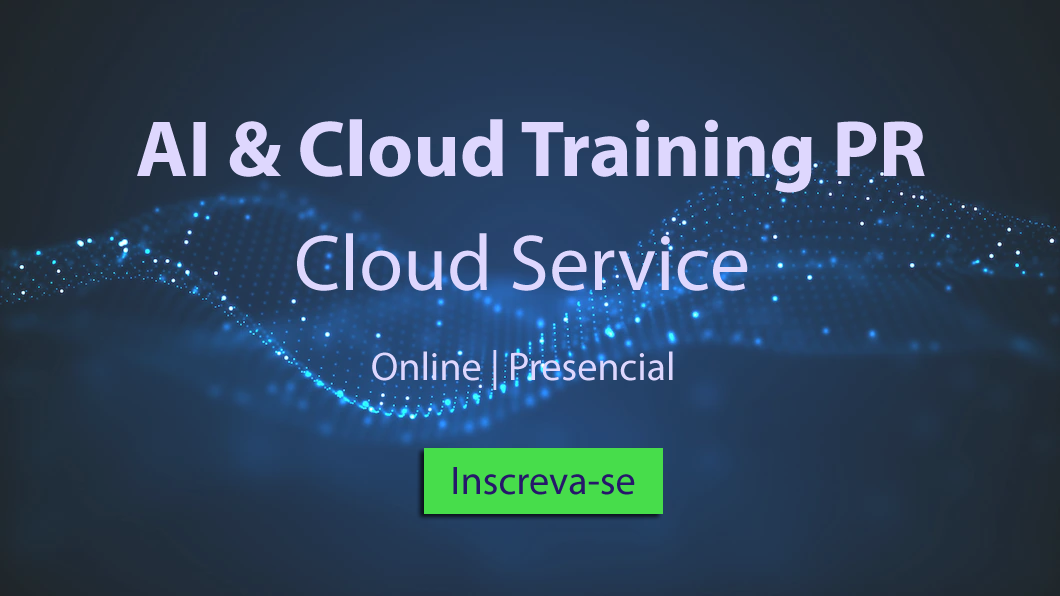
<style>
.page{position:relative;width:1060px;height:596px}
.page>*{position:absolute;margin:0}
.t1{font:80px "MyriadPro-Bold";color:#ded7fe}
.t2{font:80px "MyriadPro-Regular";color:#ded7fe}
.t3{font:40px "MyriadPro-Regular";color:#ded7fe}
.t4{font:40px "MyriadPro-Regular";color:#27196b}
</style>
<div class="page">
<p class="t1" style="left:137px;top:119px;width:788px;height:74px">AI &amp; Cloud Training PR</p>
<p class="t2" style="left:297px;top:233px;width:451px;height:58px">Cloud Service</p>
<p class="t3" style="left:372px;top:350px;width:301px;height:40px">Online | Presencial</p>
<p class="t4" style="left:453px;top:467px;width:182px;height:28px">Inscreva-se</p>
</div>
